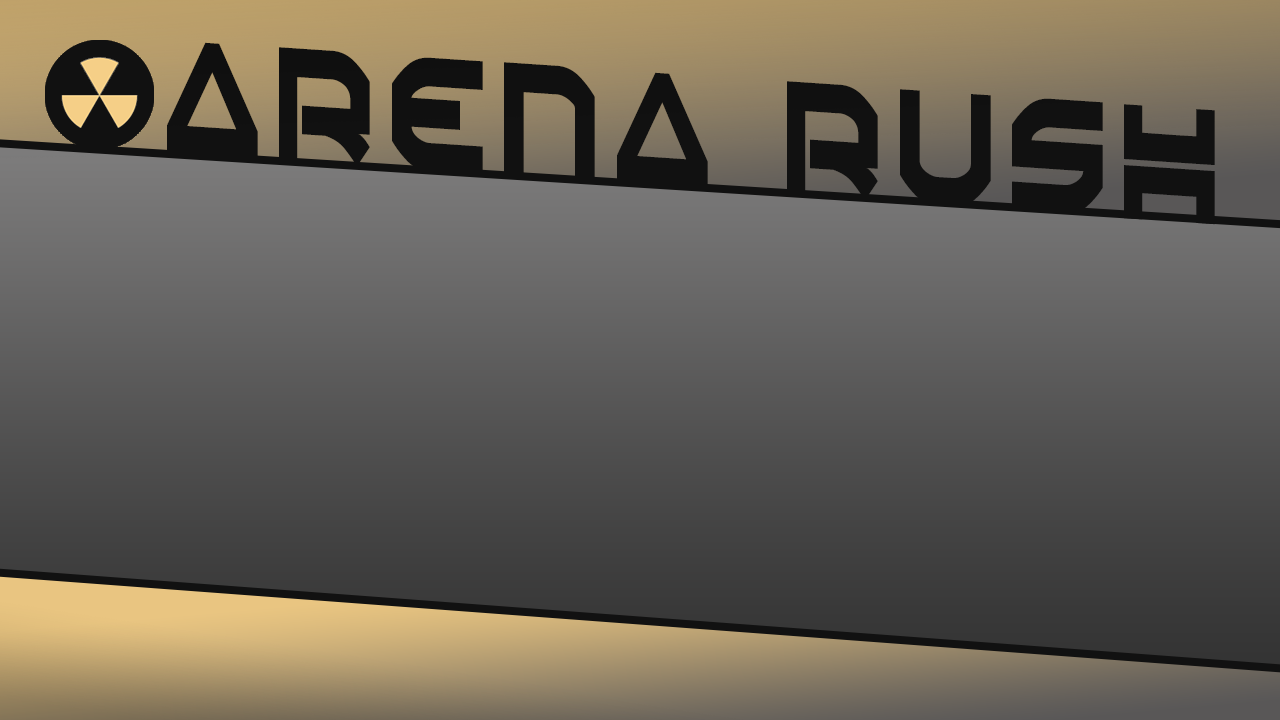
<style>
.page{position:relative;width:1280px;height:720px}
.page>*{position:absolute;margin:0}
.t1{font:145.5px "Oberon";letter-spacing:0.04em;color:#111111;scale:0.64 1}
</style>
<div class="page">
<p class="t1" style="left:167px;top:42px;width:1048px;height:183px;rotate:4deg">Arena Rush</p>
</div>
